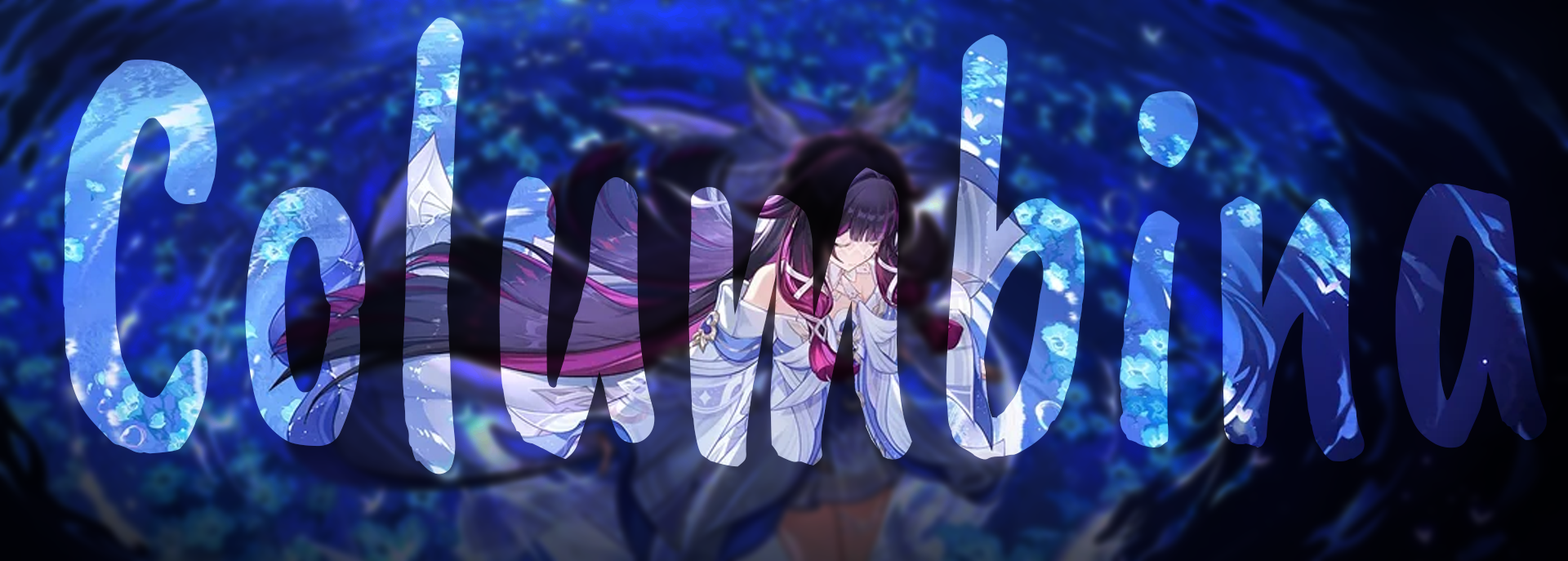
<style>
.page{position:relative;width:1568px;height:561px}
.page>*{position:absolute;margin:0}
.t1{font:622.1px "CaveatBrush-Regular";scale:0.65 1}
</style>
<div class="page">
<p class="t1" style="left:63px;top:17px;width:1484px;height:457px">Columbina</p>
</div>
